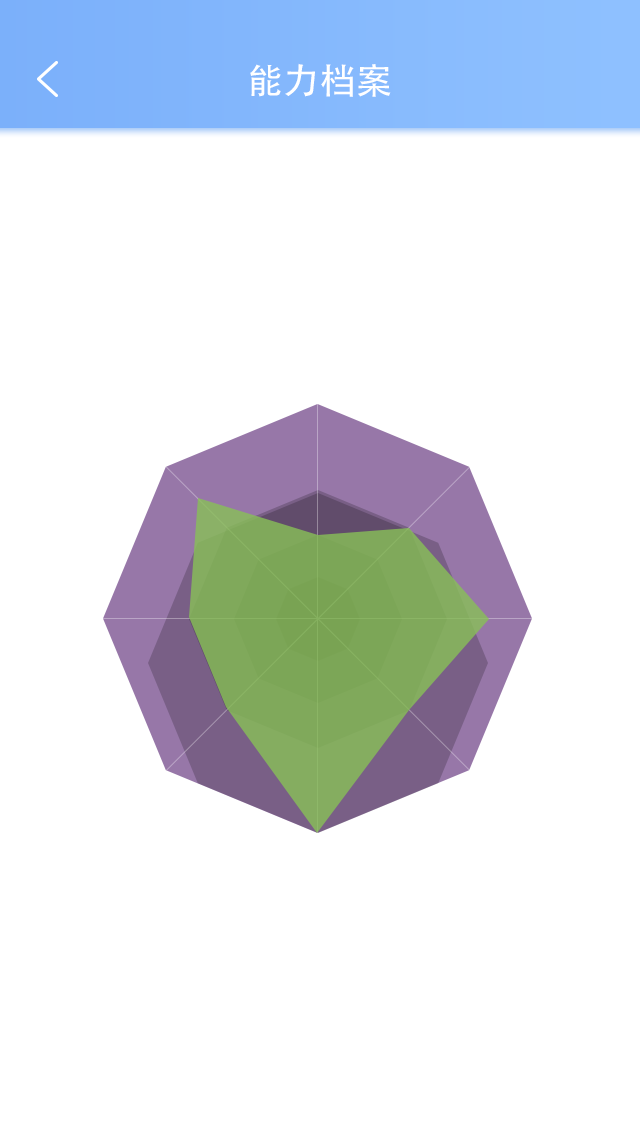
<style>
.page{position:relative;width:640px;height:1136px;background:#ffffff}
.page>*{position:absolute;margin:0}
.t1{font:36px "AdobeHeitiStd-Regular";letter-spacing:0.01em;color:#ffffff}
</style>
<div class="page">
<p class="t1" style="left:250px;top:63px;width:141px;height:34px">能力档案</p>
</div>
